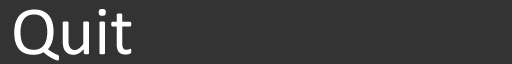
<style>
.page{position:relative;width:512px;height:64px;background:#333333}
.page>*{position:absolute;margin:0}
.t1{font:69.4px "Calibri";color:#ffffff}
</style>
<div class="page">
<p class="t1" style="left:14px;top:9px;width:118px;height:52px">Quit</p>
</div>
